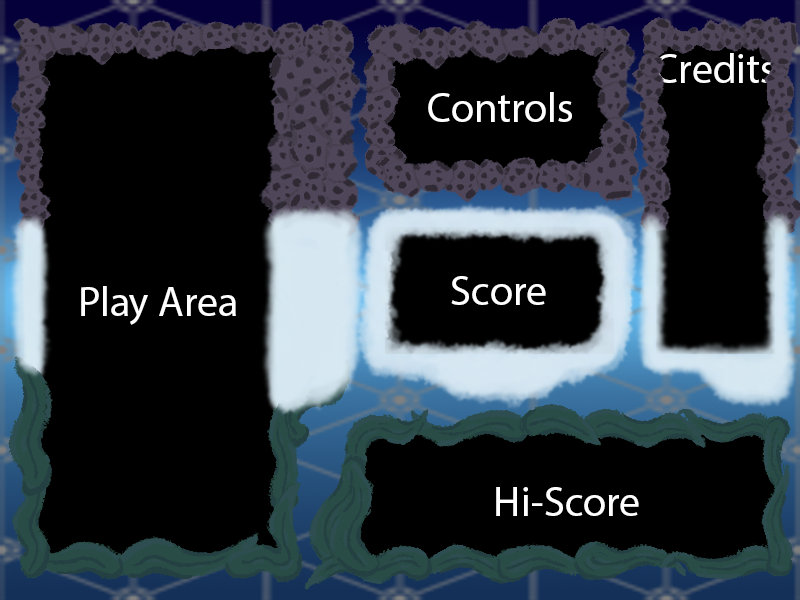
<style>
.page{position:relative;width:800px;height:600px;background:#000000}
.page>*{position:absolute;margin:0}
.t1{font:42px "MyriadPro-Regular";color:#ffffff}
</style>
<div class="page">
<p class="t1" style="left:655px;top:53px;width:120px;height:30px">Credits</p>
<p class="t1" style="left:428px;top:92px;width:144px;height:30px">Controls</p>
<p class="t1" style="left:451px;top:276px;width:95px;height:29px">Score</p>
<p class="t1" style="left:81px;top:286px;width:155px;height:39px">Play Area</p>
<p class="t1" style="left:496px;top:487px;width:143px;height:29px">Hi-Score</p>
</div>
